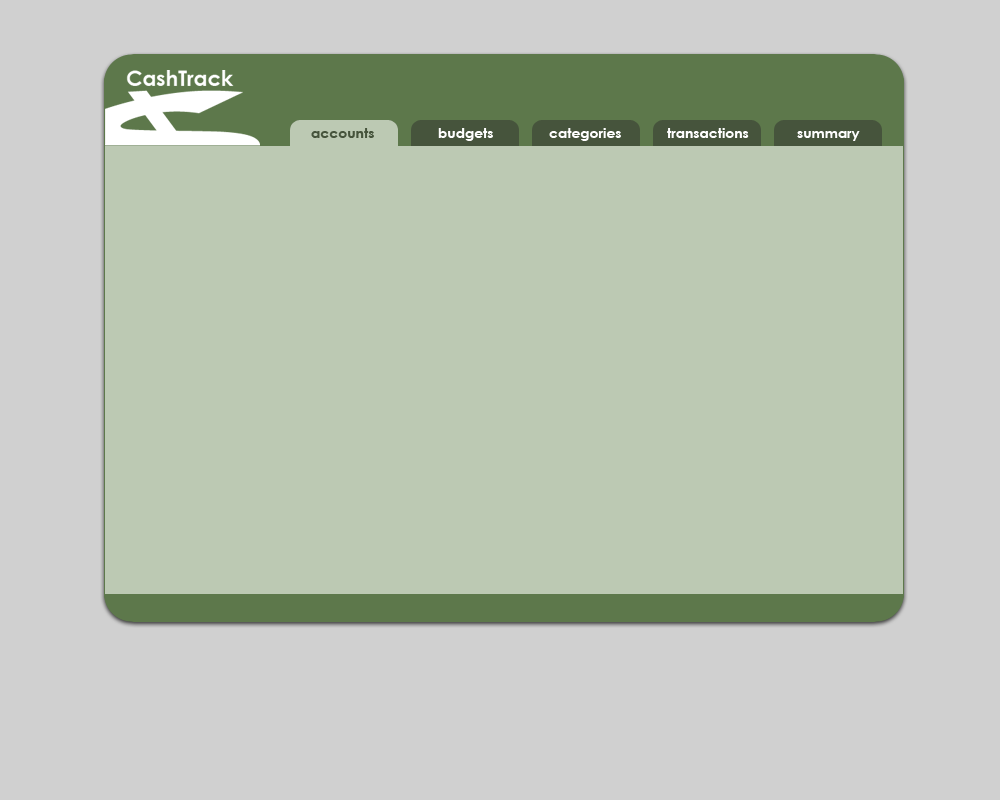
<style>
.page{position:relative;width:1000px;height:800px;background:#bcc9b3}
.page>*{position:absolute;margin:0}
.t1{font:14px "CenturyGothic-Bold";color:#46543c}
.t2{font:14px "CenturyGothic-Bold";color:#ffffff}
</style>
<div class="page">
<p class="t1" style="left:311px;top:128px;width:63px;height:10px">accounts</p>
<p class="t1" style="left:311px;top:128px;width:63px;height:10px">accounts</p>
<p class="t2" style="left:438px;top:128px;width:55px;height:13px">budgets</p>
<p class="t2" style="left:549px;top:128px;width:72px;height:13px">categories</p>
<p class="t2" style="left:667px;top:128px;width:82px;height:10px">transactions</p>
<p class="t2" style="left:797px;top:131px;width:63px;height:10px">summary</p>
</div>
